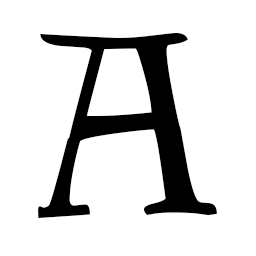
<style>
.page{position:relative;width:256px;height:256px;background:#ffffff}
.page>*{position:absolute;margin:0}
.t1{font:256.5px "MagicMedieval";color:#000000}
</style>
<div class="page">
<p class="t1" style="left:38px;top:33px;width:179px;height:185px">A</p>
</div>
